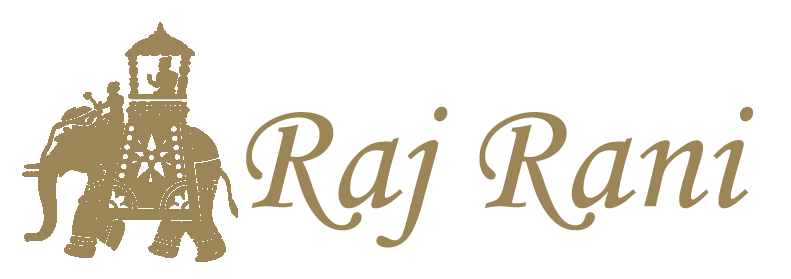
<style>
.page{position:relative;width:791px;height:279px;background:#ffffff}
.page>*{position:absolute;margin:0}
.t1{font:160px "MonotypeCorsiva";color:#9c8657}
</style>
<div class="page">
<p class="t1" style="left:246px;top:106px;width:508px;height:142px">Raj Rani</p>
</div>
